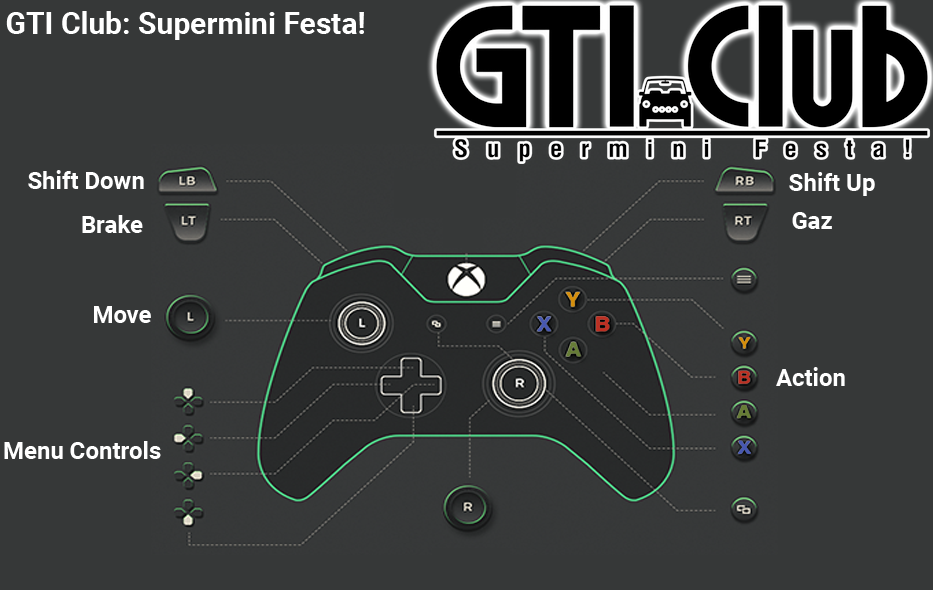
<style>
.page{position:relative;width:933px;height:590px;background:#363838}
.page>*{position:absolute;margin:0}
.t1{font:30px "Roboto-Bold";color:#ffffff}
.t2{font:24px "Roboto-Bold";color:#ffffff}
</style>
<div class="page">
<p class="t1" style="left:6px;top:11px;width:358px;height:29px">GTI Club: Supermini Festa!</p>
<p class="t2" style="left:28px;top:170px;width:116px;height:19px">Shift Down</p>
<p class="t2" style="left:789px;top:172px;width:86px;height:24px">Shift Up</p>
<p class="t2" style="left:82px;top:215px;width:61px;height:18px">Brake</p>
<p class="t2" style="left:792px;top:212px;width:40px;height:17px">Gaz</p>
<p class="t2" style="left:94px;top:306px;width:57px;height:17px">Move</p>
<p class="t2" style="left:776px;top:367px;width:69px;height:19px">Action</p>
<p class="t2" style="left:4px;top:441px;width:157px;height:18px">Menu Controls</p>
</div>
